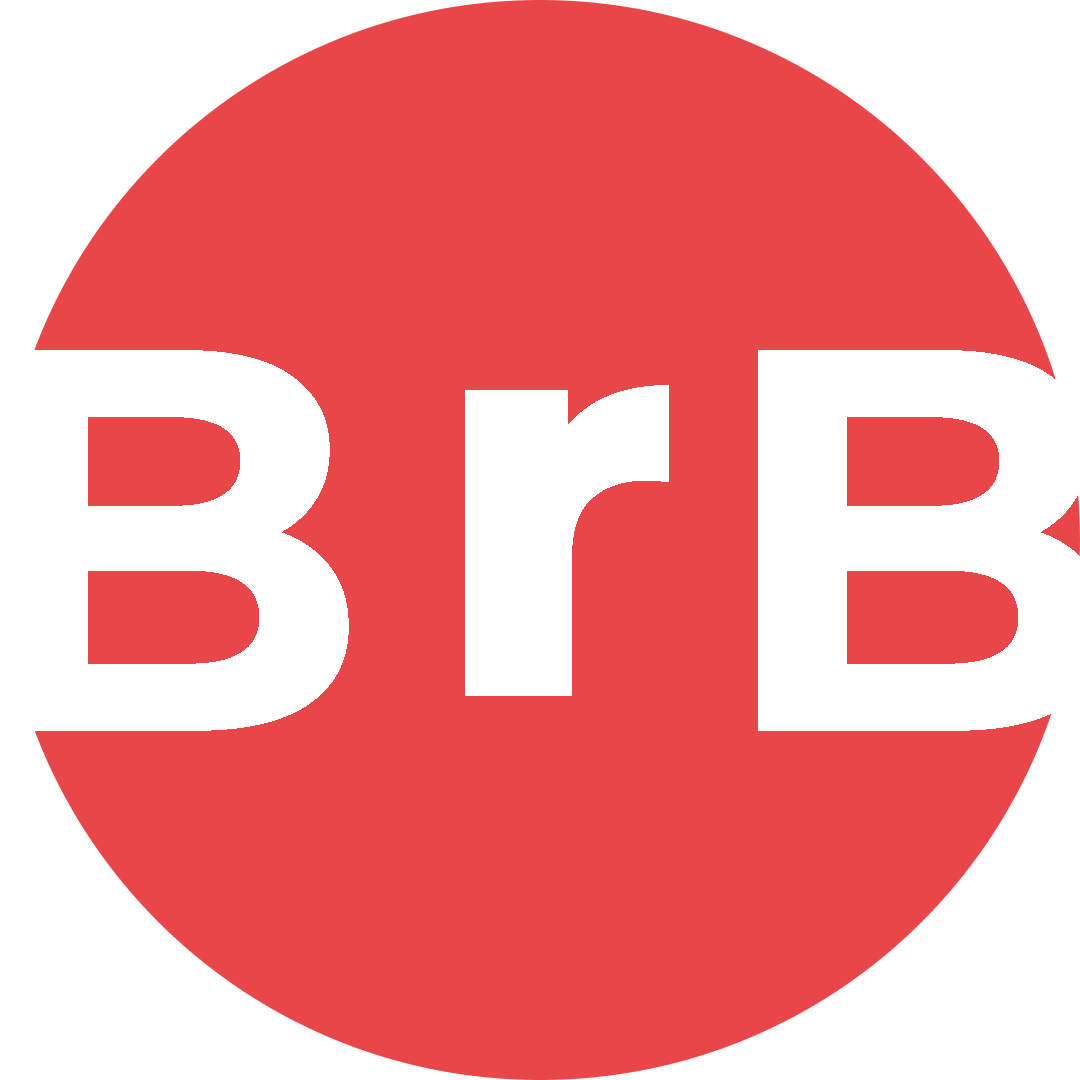
<style>
.page{position:relative;width:1080px;height:1080px;background:#e9464a}
.page>*{position:absolute;margin:0}
.t1{font:542.4px "MontserratRoman-Bold";color:#ffffff}
.t2{font:560.7px "MontserratRoman-ExtraBold";color:#ffffff}
</style>
<div class="page">
<p class="t1" style="left:0px;top:350px;width:349px;height:381px">B</p>
<p class="t2" style="left:465px;top:385px;width:204px;height:311px">r</p>
</div>
